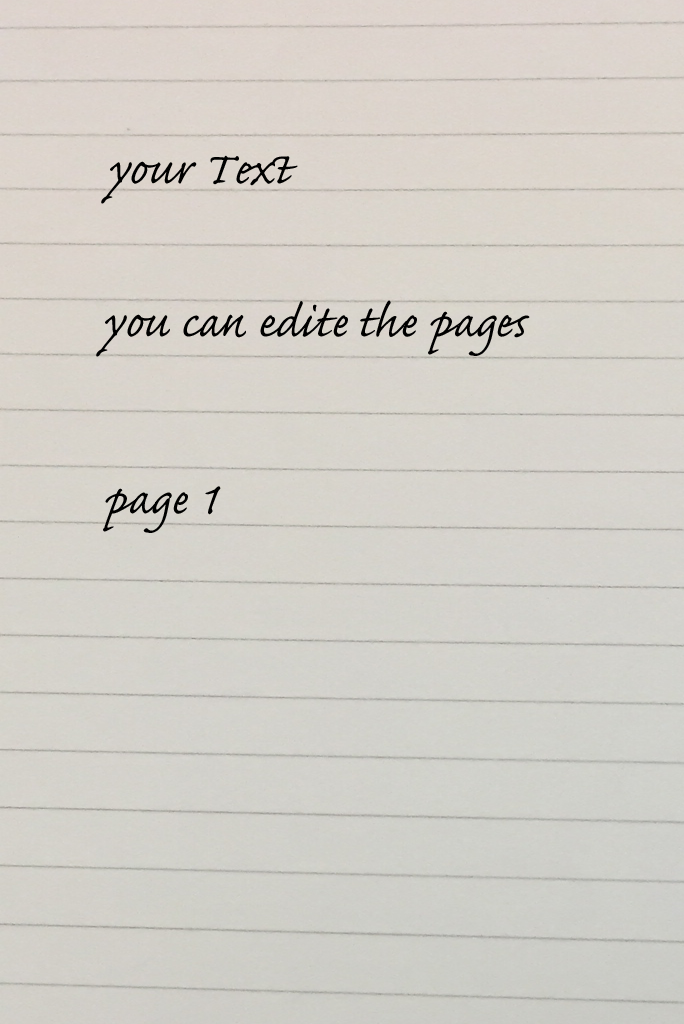
<style>
.page{position:relative;width:684px;height:1024px}
.page>*{position:absolute;margin:0}
.t1{font:58.3px "CaflischScriptPro-Regular";color:#000000}
</style>
<div class="page">
<p class="t1" style="left:101px;top:155px;width:197px;height:49px">your Text</p>
<p class="t1" style="left:96px;top:300px;width:434px;height:57px">you can edite the pages</p>
<p class="t1" style="left:103px;top:486px;width:118px;height:47px">page 1</p>
</div>
